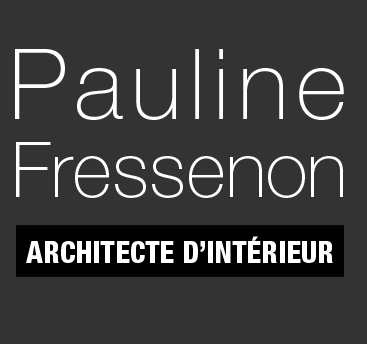
<style>
.page{position:relative;width:367px;height:344px;background:#333333}
.page>*{position:absolute;margin:0}
.t1{font:97.4px "HelveticaNeueLTPro-Th";letter-spacing:0.08em;color:#ffffff}
.t2{font:77px "HelveticaNeueLTPro-Th";color:#ffffff}
.t3{font:29.4px "HelveticaNeueLTPro-HvCn";color:#ffffff;text-transform:uppercase}
</style>
<div class="page">
<p class="t1" style="left:15px;top:49px;width:329px;height:71px">Pauline</p>
<p class="t2" style="left:16px;top:142px;width:327px;height:56px">Fressenon</p>
<p class="t3" style="left:26px;top:236px;width:307px;height:27px">Architecte d’intérieur</p>
</div>
